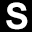
<style>
.page{position:relative;width:32px;height:32px;background:#000000}
.page>*{position:absolute;margin:0}
.t1{font:36px "Arial-BoldMT";letter-spacing:2.26em;color:#ffffff}
</style>
<div class="page">
<p class="t1" style="left:6px;top:2px;width:22px;height:28px">S</p>
</div>
